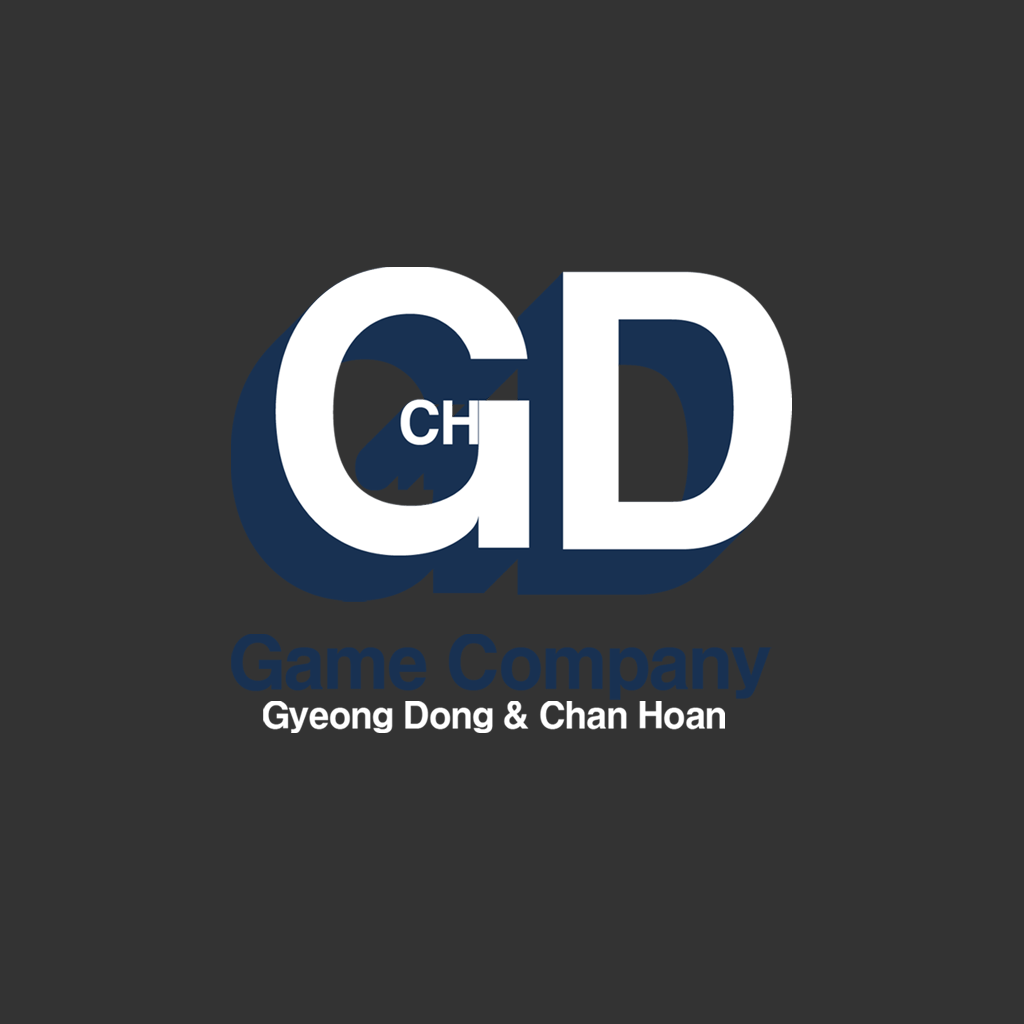
<style>
.page{position:relative;width:1024px;height:1024px;background:#333333}
.page>*{position:absolute;margin:0}
.t1{font:71.6px "HYgtrE";letter-spacing:-0.065em;color:#183152}
.t2{font:35.8px "HYgtrE";letter-spacing:-0.065em;color:#ffffff}
</style>
<div class="page">
<p class="t1" style="left:231px;top:634px;width:541px;height:66px">Game Company</p>
<p class="t2" style="left:263px;top:701px;width:462px;height:32px">Gyeong Dong &amp; Chan Hoan</p>
</div>
